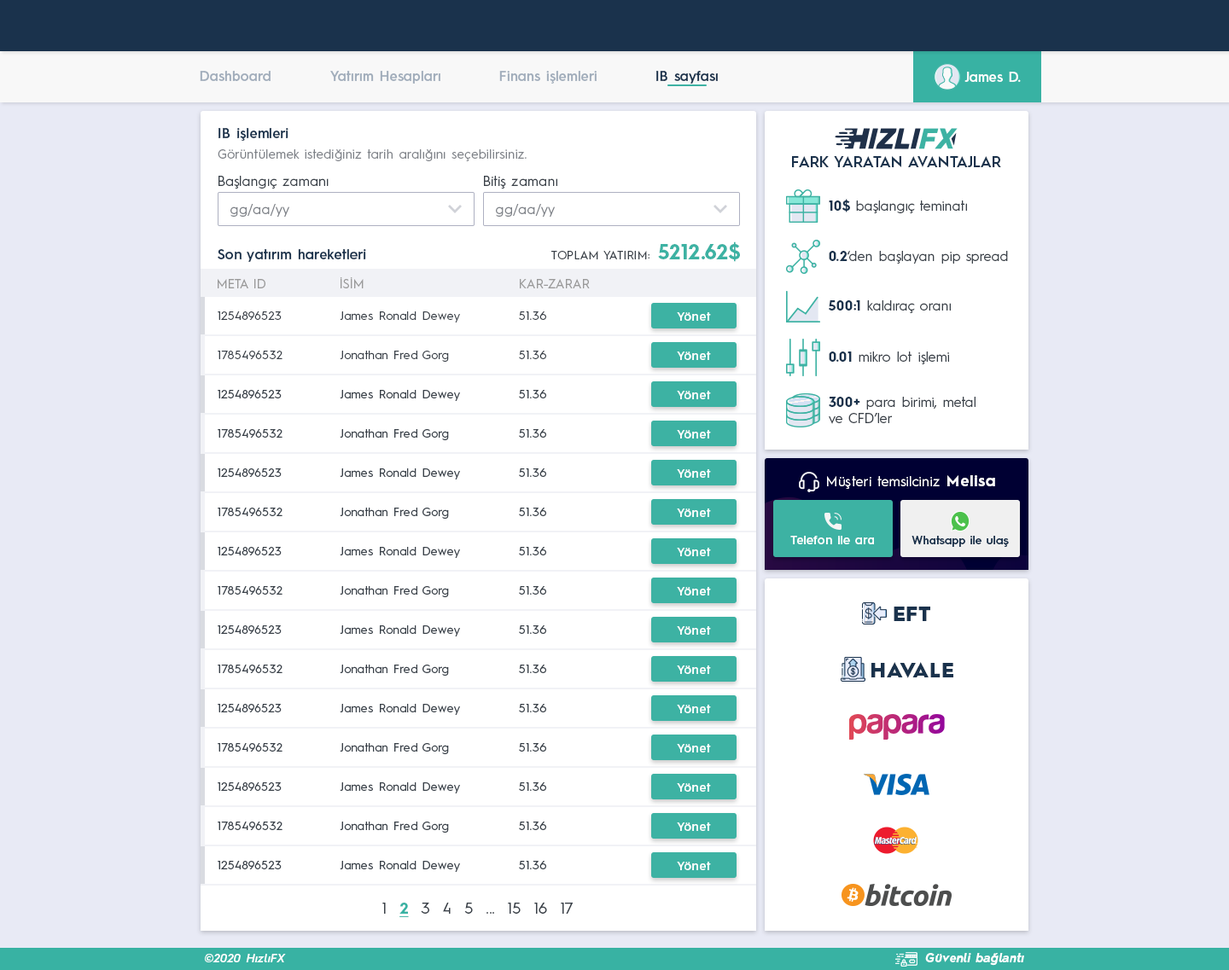
<style>
.page{position:relative;width:1229px;height:970px;background:#ffffff}
.page>*{position:absolute;margin:0}
.t1{font:13.7px "HurmeGeometricSans3-SemiBold";color:#a1adbb}
.t2{font:13.7px "HurmeGeometricSans3-SemiBold";color:#1a324c}
.t3{font:13.7px "HurmeGeometricSans3-SemiBold";color:#fefefe}
.t4{font:13.7px "HurmeGeometricSans3-SemiBold";letter-spacing:0.01em;color:#1a324c}
.t5{font:12.8px "HurmeGeometricSans1-Regular";letter-spacing:0.025em;color:#7f8389}
.t6{font:15.4px "HurmeGeometricSans1-SemiBold";color:#1a324c}
.t7{font:13.7px "HurmeGeometricSans1-Regular";letter-spacing:0.01em;color:#3a4149}
.t8{font:13.7px "HurmeGeometricSans1-Regular";letter-spacing:0.01em;color:#7f8389}
.t9{font:13.7px "HurmeGeometricSans1-Regular";color:#3a4149}
.t10{font:13.7px "HurmeGeometricSans1-Bold";color:#1a324c}
.t11{font:20.5px "HurmeGeometricSans1-Bold";letter-spacing:0.01em;color:#3db2a3}
.t12{font:11.9px "HurmeGeometricSans1-Regular";letter-spacing:0.01em;color:#3a4149}
.t13{font:12.8px "HurmeGeometricSans1-Regular";color:#999999}
.t14{font:11.9px "HurmeGeometricSans1-Regular";letter-spacing:0.025em;color:#3a4149}
.t15{font:11.9px "HurmeGeometricSans3-SemiBold";letter-spacing:0.025em;color:#ffffff}
.t16{font:13.7px "HurmeGeometricSans1-Regular";letter-spacing:0.025em;color:#ffffff}
.t17{font:15.4px "HurmeGeometricSans1-Bold";letter-spacing:0.05em;color:#ffffff}
.t18{font:11.9px "HurmeGeometricSans3-SemiBold";letter-spacing:0.01em;color:#ffffff}
.t19{font:11.5px "HurmeGeometricSans3-SemiBold";letter-spacing:0.01em;color:#1a324c}
.t20{font:20.5px "HurmeGeometricSans1-Black";letter-spacing:0.025em;color:#1a324c}
.t21{font:15.4px "HurmeGeometricSans1-Regular";letter-spacing:0.025em;color:#3a4149}
.t22{font:15.4px "HurmeGeometricSans1-Bold";letter-spacing:0.025em;color:#38b2a3;text-decoration:underline}
.t23{font:12px "HurmeGeometricSans2-BoldObl";letter-spacing:0.025em;color:#ffffff}
.t24{font:12px "HurmeGeometricSans2-SemiBoldObl";letter-spacing:0.025em;color:#ffffff}
</style>
<div class="page">
<p class="t1" style="left:200px;top:71px;width:71px;height:10px">Dashboard</p>
<p class="t1" style="left:330px;top:71px;width:110px;height:13px">Yatırım Hesapları</p>
<p class="t1" style="left:499px;top:71px;width:98px;height:13px">Finans işlemleri</p>
<p class="t2" style="left:656px;top:71px;width:62px;height:13px">IB sayfası</p>
<p class="t3" style="left:964px;top:72px;width:57px;height:10px">James D.</p>
<p class="t4" style="left:218px;top:128px;width:70px;height:13px">IB işlemleri</p>
<p class="t5" style="left:218px;top:149px;width:309px;height:12px">Görüntülemek istediğiniz tarih aralığını seçebilirsiniz.</p>
<p class="t6" style="left:792px;top:156px;width:209px;height:11px">FARK YARATAN AVANTAJLAR</p>
<p class="t7" style="left:218px;top:176px;width:111px;height:13px">Başlangıç zamanı</p>
<p class="t7" style="left:484px;top:176px;width:73px;height:13px">Bitiş zamanı</p>
<p class="t8" style="left:230px;top:204px;width:59px;height:13px">gg/aa/yy</p>
<p class="t8" style="left:496px;top:204px;width:59px;height:13px">gg/aa/yy</p>
<p class="t9" style="left:829px;top:199px;width:138px;height:14px"><span class="t10">10$</span> başlangıç teminatı</p>
<p class="t11" style="left:658px;top:242px;width:82px;height:20px">5212.62$</p>
<p class="t4" style="left:218px;top:249px;width:148px;height:13px">Son yatırım hareketleri</p>
<p class="t12" style="left:551px;top:251px;width:98px;height:8px">TOPLAM YATIRIM:</p>
<p class="t9" style="left:829px;top:251px;width:179px;height:13px"><span class="t10">0.2</span>‘den başlayan pip spread</p>
<p class="t13" style="left:218px;top:279px;width:47px;height:9px">META ID</p>
<p class="t13" style="left:340px;top:277px;width:24px;height:11px">İSİM</p>
<p class="t13" style="left:520px;top:279px;width:70px;height:9px">KAR-ZARAR</p>
<p class="t9" style="left:828px;top:300px;width:123px;height:13px"><span class="t10">500:1</span> kaldıraç oranı</p>
<p class="t14" style="left:218px;top:311px;width:64px;height:9px">1254896523</p>
<p class="t14" style="left:340px;top:311px;width:120px;height:12px">James Ronald Dewey</p>
<p class="t14" style="left:519px;top:311px;width:27px;height:9px">51.36</p>
<p class="t15" style="left:677px;top:312px;width:34px;height:9px">Yönet</p>
<p class="t14" style="left:218px;top:351px;width:64px;height:8px">1785496532</p>
<p class="t14" style="left:340px;top:351px;width:109px;height:11px">Jonathan Fred Gorg</p>
<p class="t14" style="left:519px;top:351px;width:27px;height:8px">51.36</p>
<p class="t15" style="left:677px;top:352px;width:34px;height:8px">Yönet</p>
<p class="t9" style="left:829px;top:352px;width:120px;height:12px"><span class="t10">0.01</span> mikro lot işlemi</p>
<p class="t9" style="left:829px;top:397px;width:146px;height:27px"><span class="t10">300+</span> para birimi, metal<br>ve CFD’ler</p>
<p class="t16" style="left:827px;top:475px;width:168px;height:14px">Müşteri temsilciniz <span class="t17">Melisa</span></p>
<p class="t18" style="left:790px;top:536px;width:84px;height:8px">Telefon ile ara</p>
<p class="t19" style="left:911px;top:536px;width:98px;height:11px">Whatsapp ile ulaş</p>
<p class="t20" style="left:894px;top:607px;width:36px;height:14px">EFT</p>
<p class="t20" style="left:871px;top:662px;width:82px;height:16px">HAVALE</p>
<p class="t21" style="left:382px;top:903px;width:191px;height:14px">1  <span class="t22">2</span>  3  4  5  ...  15  16  17</p>
<p class="t23" style="left:925px;top:953px;width:99px;height:13px">Güvenli bağlantı</p>
<p class="t24" style="left:205px;top:954px;width:81px;height:9px">©2020 HızlıFX</p>
</div>
